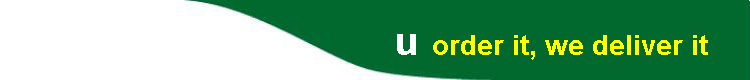
<style>
.page{position:relative;width:750px;height:80px;background:#01692e}
.page>*{position:absolute;margin:0}
.t1{font:28px "Arial-BoldMT";color:#ffff00}
.t2{font:40px "Arial-BoldMT";color:#ffffff}
</style>
<div class="page">
<p class="t1" style="left:397px;top:34px;width:311px;height:26px"><span class="t2">u </span>order it, we deliver it</p>
</div>
